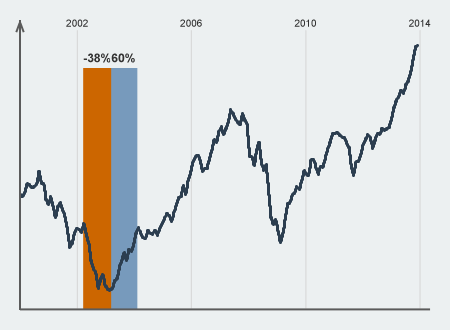
<style>
.page{position:relative;width:450px;height:330px;background:#ecf0f1}
.page>*{position:absolute;margin:0}
.t1{font:10px "ArialMT";color:#333333}
.t2{font:12px "Arial-BoldMT";color:#333333}
</style>
<div class="page">
<p class="t1" style="left:66px;top:19px;width:22px;height:8px">2002</p>
<p class="t1" style="left:180px;top:19px;width:22px;height:8px">2006</p>
<p class="t1" style="left:294px;top:19px;width:22px;height:8px">2010</p>
<p class="t1" style="left:409px;top:19px;width:22px;height:8px">2014</p>
<p class="t2" style="left:83px;top:53px;width:28px;height:10px">-38%</p>
<p class="t2" style="left:111px;top:53px;width:24px;height:10px">60%</p>
</div>
